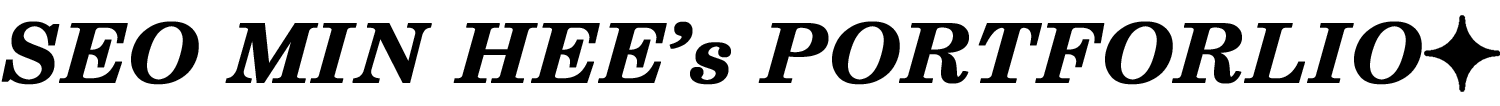
<style>
.page{position:relative;width:1500px;height:106px;background:#ffffff}
.page>*{position:absolute;margin:0}
.t1{font:81.8px "CenturySchoolbook-BoldItalic";letter-spacing:0.005em;color:#000000;font-weight:bold;scale:1.05 1}
</style>
<div class="page">
<p class="t1" style="left:1px;top:21px;width:1421px;height:64px">SEO MIN HEE’s PORTFORLIO</p>
</div>
